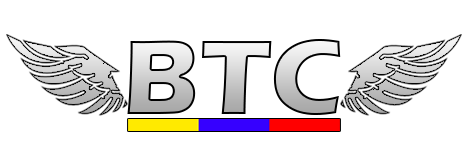
<style>
.page{position:relative;width:467px;height:163px;background:#ffffff}
.page>*{position:absolute;margin:0}
.t1{font:110px "ErasITC-Bold"}
</style>
<div class="page">
<p class="t1" style="left:127px;top:39px;width:214px;height:76px">BTC</p>
</div>
